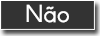
<style>
.page{position:relative;width:100px;height:36px;background:#333333}
.page>*{position:absolute;margin:0}
.t1{font:24px "Arcon-Regular";color:#ffffff}
</style>
<div class="page">
<p class="t1" style="left:26px;top:4px;width:43px;height:19px">Não</p>
</div>
